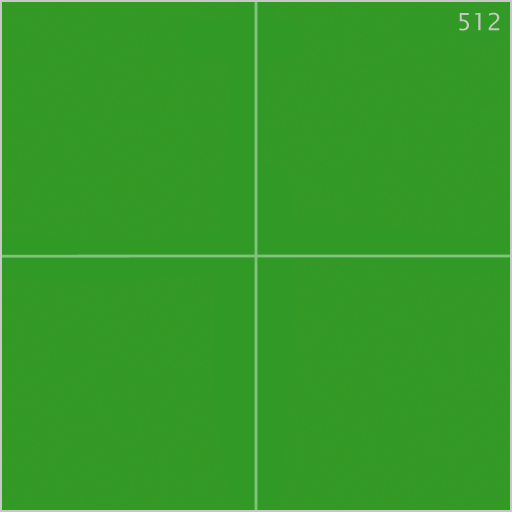
<style>
.page{position:relative;width:512px;height:512px;background:#319925}
.page>*{position:absolute;margin:0}
.t1{font:24px "LucidaSans";color:#c8c8c8;text-transform:uppercase}
</style>
<div class="page">
<p class="t1" style="left:459px;top:12px;width:41px;height:19px">512</p>
</div>
